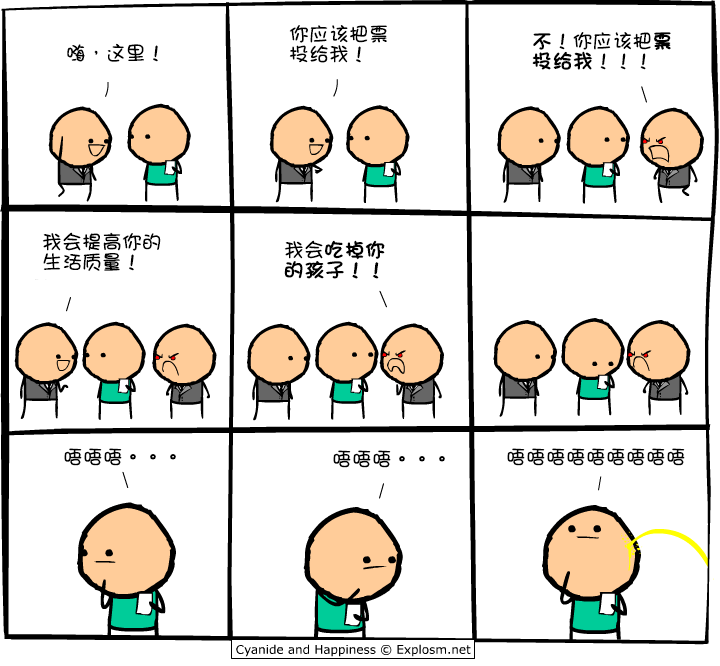
<style>
.page{position:relative;width:720px;height:666px;background:#ffffff}
.page>*{position:absolute;margin:0}
.t1{font:20px/20px "DFGirl";color:#000000}
.t2{font:20px/20px "DFGirl";color:#000000;font-weight:bold}
.t3{font:20px "DFGirl";color:#000000}
</style>
<div class="page">
<p class="t1" style="left:289px;top:25px;width:98px;height:38px">你应该把票<br>投给我！</p>
<p class="t1" style="left:532px;top:32px;width:139px;height:38px"><span class="t2">不</span>！你应该把<span class="t2">票<br>投给我</span>！！！</p>
<p class="t3" style="left:67px;top:43px;width:91px;height:19px">嗨，这里！</p>
<p class="t1" style="left:42px;top:232px;width:119px;height:39px">我会提高你的<br>生活质量！</p>
<p class="t2" style="left:284px;top:240px;width:101px;height:39px"><span class="t1">我会</span>吃掉你<br>的孩子！！</p>
<p class="t3" style="left:64px;top:448px;width:112px;height:18px">唔唔唔。。。</p>
<p class="t3" style="left:507px;top:448px;width:178px;height:18px">唔唔唔唔唔唔唔唔唔</p>
<p class="t3" style="left:333px;top:450px;width:112px;height:18px">唔唔唔。。。</p>
</div>
